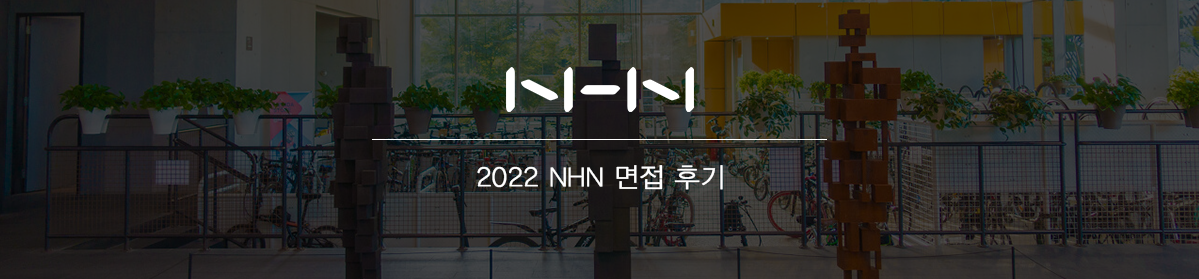
<style>
.page{position:relative;width:1199px;height:279px}
.page>*{position:absolute;margin:0}
.t1{font:26.7px "YDIYGO310";color:#ffffff;font-weight:bold}
</style>
<div class="page">
<p class="t1" style="left:477px;top:165px;width:246px;height:25px">2022 NHN 면접 후기</p>
</div>
